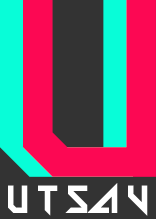
<style>
.page{position:relative;width:156px;height:219px;background:#333333}
.page>*{position:absolute;margin:0}
.t1{font:236.3px "Big-Quicksand";color:#08fdd8}
.t2{font:236.3px "Big-Quicksand";color:#fc0853}
.t3{font:43.8px "Big-Quicksand";color:#ffffff}
</style>
<div class="page">
<p class="t1" style="left:0px;top:0px;width:133px;height:177px">U</p>
<p class="t2" style="left:23px;top:0px;width:133px;height:177px">U</p>
<p class="t3" style="left:8px;top:183px;width:140px;height:33px">u t s a v</p>
</div>
